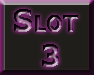
<style>
.page{position:relative;width:94px;height:75px;background:#201e1a}
.page>*{position:absolute;margin:0}
.t1{font:30px "Tahoma-Bold";font-variant:small-caps;font-weight:bold}
</style>
<div class="page">
<p class="t1" style="left:14px;top:9px;width:64px;height:58px;text-align:center">Slot <br>3</p>
</div>
